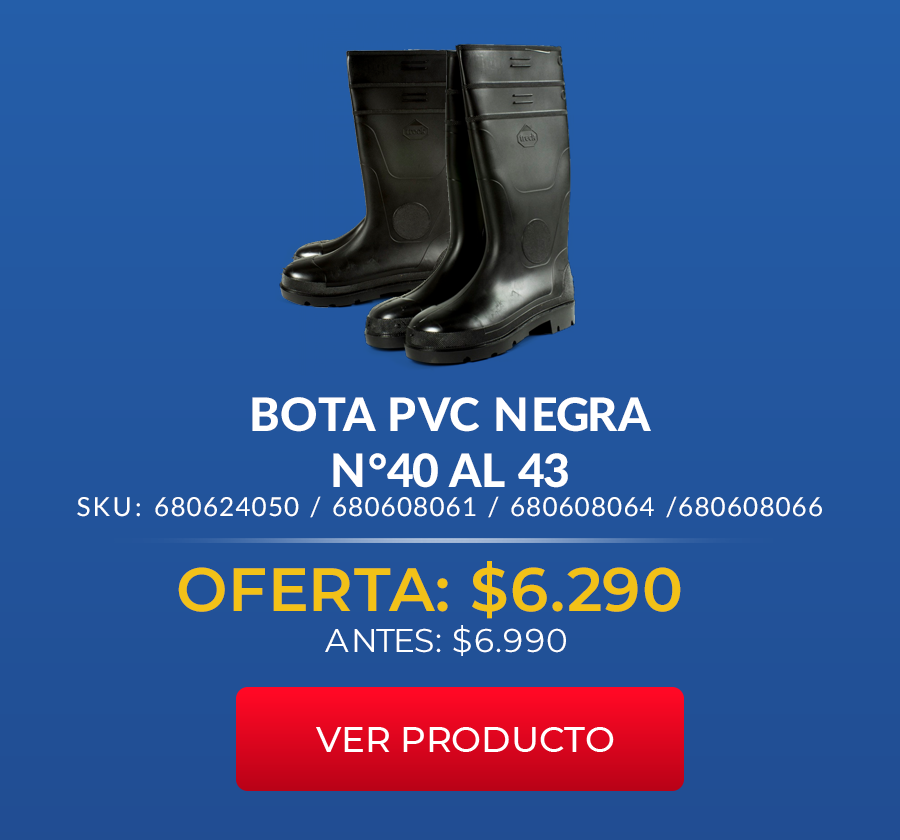
<style>
.page{position:relative;width:900px;height:840px}
.page>*{position:absolute;margin:0}
.t1{font:46.3px "Lato-Heavy";color:#ffffff;text-transform:uppercase}
.t2{font:26px "Lato-Regular";letter-spacing:0.105em;color:#ffffff;text-transform:uppercase}
.t3{font:61px "Montserrat-SemiBold";color:#f2c118;text-transform:uppercase}
.t4{font:32.8px "Montserrat-Regular";color:#ffffff;text-transform:uppercase}
</style>
<div class="page">
<p class="t1" style="left:252px;top:397px;width:399px;height:91px;text-align:center">Bota pvc negra<br>N°40 al 43</p>
<p class="t2" style="left:77px;top:496px;width:745px;height:22px">sku: 680624050 / 680608061 / 680608064 /680608066</p>
<p class="t3" style="left:178px;top:561px;width:503px;height:58px">oferta: $6.290</p>
<p class="t4" style="left:325px;top:625px;width:241px;height:31px">antes: $6.990</p>
</div>
